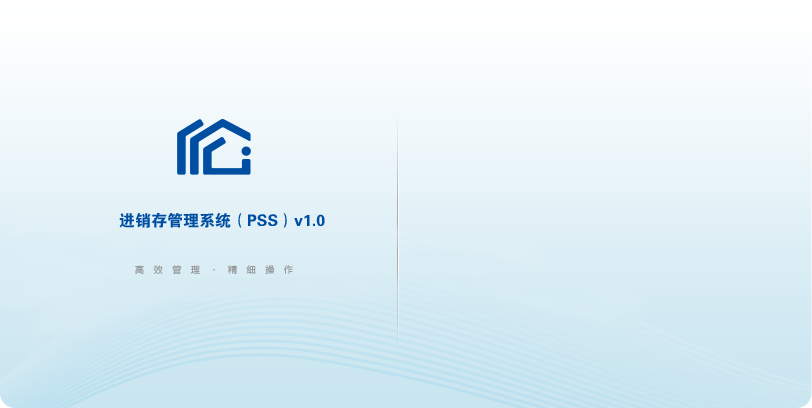
<style>
.page{position:relative;width:812px;height:408px}
.page>*{position:absolute;margin:0}
.t1{font:16px "FZDHTJW--GB1-0";color:#004ea2}
.t2{font:9.3px "FZLTXHK";letter-spacing:1em;color:#999b9c}
</style>
<div class="page">
<p class="t1" style="left:119px;top:212px;width:206px;height:16px">进销存管理系统（PSS）v1.0</p>
<p class="t2" style="left:135px;top:265px;width:158px;height:10px">高效管理·精细操作</p>
</div>
